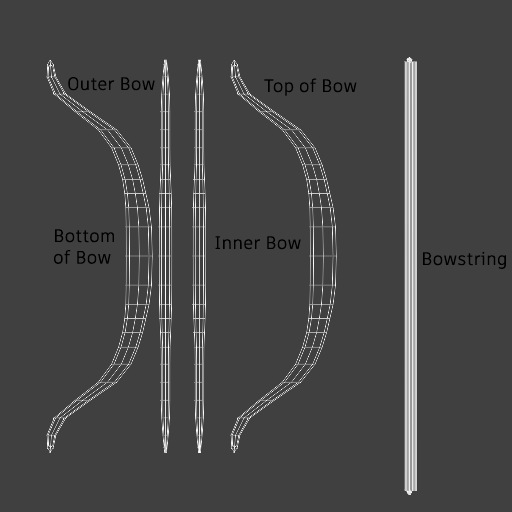
<style>
.page{position:relative;width:512px;height:512px;background:#404040}
.page>*{position:absolute;margin:0}
.t1{font:18px "ArtifaktElement-Regular";color:#000000}
</style>
<div class="page">
<p class="t1" style="left:68px;top:77px;width:87px;height:14px">Outer Bow</p>
<p class="t1" style="left:264px;top:78px;width:93px;height:18px">Top of Bow</p>
<p class="t1" style="left:54px;top:229px;width:60px;height:35px">Bottom <br>of Bow</p>
<p class="t1" style="left:215px;top:236px;width:86px;height:14px">Inner Bow</p>
<p class="t1" style="left:423px;top:251px;width:83px;height:18px">Bowstring</p>
</div>
